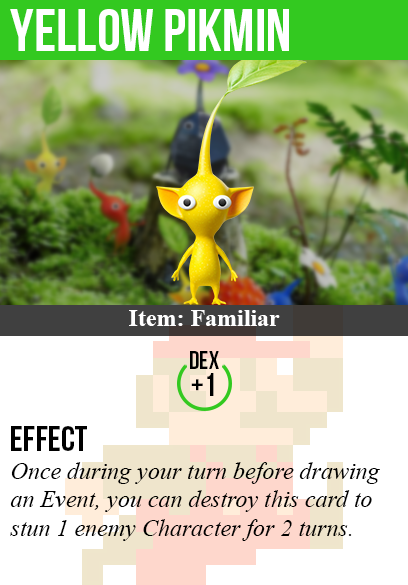
<style>
.page{position:relative;width:408px;height:585px;background:#ffffff}
.page>*{position:absolute;margin:0}
.t1{font:60px "BebasNeue";color:#ffffff}
.t2{font:24px "TimesNewRomanPS-BoldMT";color:#ffffff}
.t3{font:25px "BebasNeue";color:#000000}
.t4{font:32px "BebasNeue";color:#000000}
.t5{font:36px "BebasNeue";color:#000000}
.t6{font:24px "TimesNewRomanPS-ItalicMT";color:#000000}
</style>
<div class="page">
<p class="t1" style="left:10px;top:9px;width:279px;height:42px">yellow pikmin</p>
<p class="t2" style="left:129px;top:310px;width:151px;height:16px">Item: Familiar</p>
<p class="t3" style="left:190px;top:351px;width:29px;height:18px">dex</p>
<p class="t4" style="left:191px;top:373px;width:23px;height:23px">+1</p>
<p class="t5" style="left:11px;top:426px;width:76px;height:25px">Effect</p>
<p class="t6" style="left:10px;top:462px;width:370px;height:79px">Once during your turn before drawing<br>an Event, you can destroy this card to<br>stun 1 enemy Character for 2 turns.</p>
</div>
